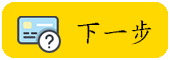
<style>
.page{position:relative;width:170px;height:60px;background:#ffd800}
.page>*{position:absolute;margin:0}
.t1{font:26.7px "¿¬Ìå";color:#000000}
</style>
<div class="page">
<p class="t1" style="left:77px;top:20px;width:75px;height:25px">下一步</p>
</div>
